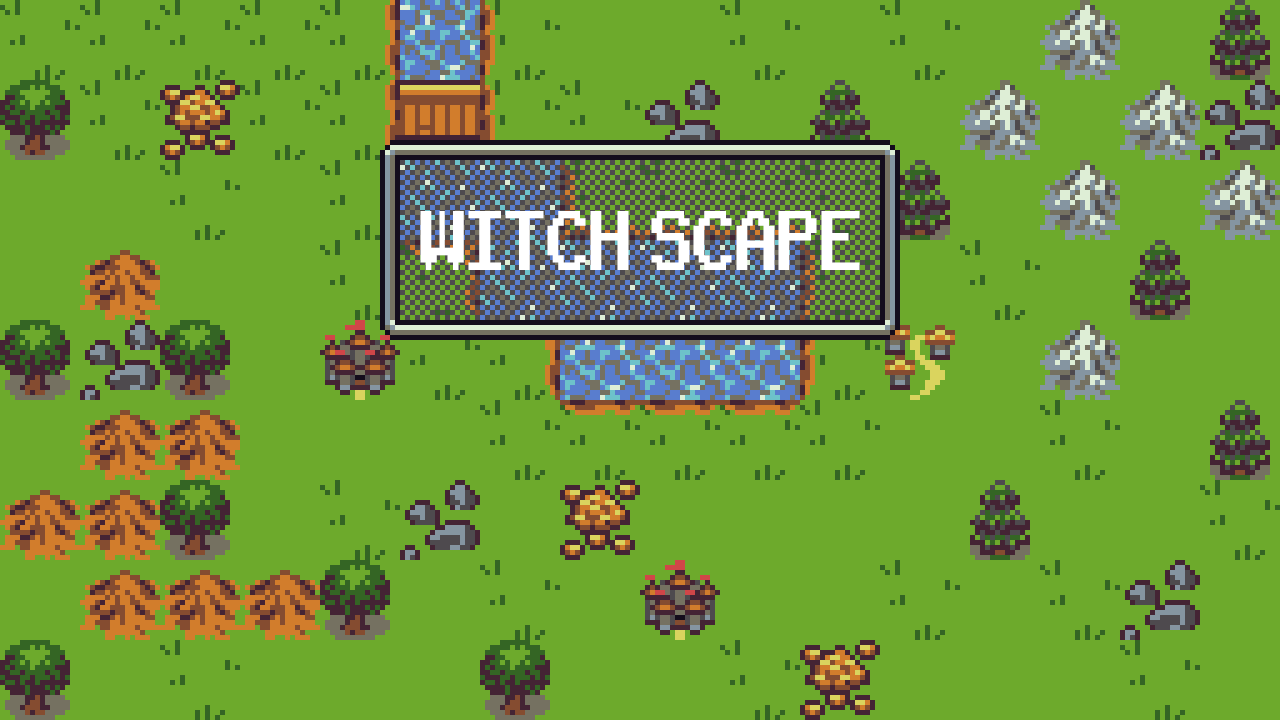
<style>
.page{position:relative;width:1280px;height:720px;background:#6daa2c}
.page>*{position:absolute;margin:0}
.t1{font:81.3px "RetroGaming";letter-spacing:-0.06em;color:#ffffff;scale:0.73 1}
</style>
<div class="page">
<p class="t1" style="left:420px;top:211px;width:440px;height:59px">WITCH SCAPE</p>
</div>
